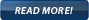
<style>
.page{position:relative;width:89px;height:20px}
.page>*{position:absolute;margin:0}
.t1{font:10px "MyriadPro-SemiboldIt";letter-spacing:0.05em;color:#fdfdfd;text-transform:uppercase}
</style>
<div class="page">
<p class="t1" style="left:15px;top:7px;width:58px;height:7px">read more!</p>
</div>
